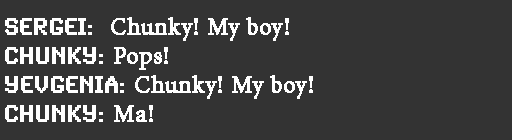
<style>
.page{position:relative;width:512px;height:140px;background:#333333}
.page>*{position:absolute;margin:0}
.t1{font:24px "MinionPro-Regular";color:#ffffff;font-weight:bold}
.t2{font:24px "SynchroLET";color:#ffffff;font-weight:bold}
</style>
<div class="page">
<p class="t1" style="left:5px;top:17px;width:308px;height:105px"><span class="t2">SERGEi:  </span>Chunky! My boy!<br><span class="t2">CHUNKY: </span>Pops!<br><span class="t2">Yevgenia: </span>Chunky! My boy!<br><span class="t2">CHUNKY: </span>Ma!</p>
</div>
